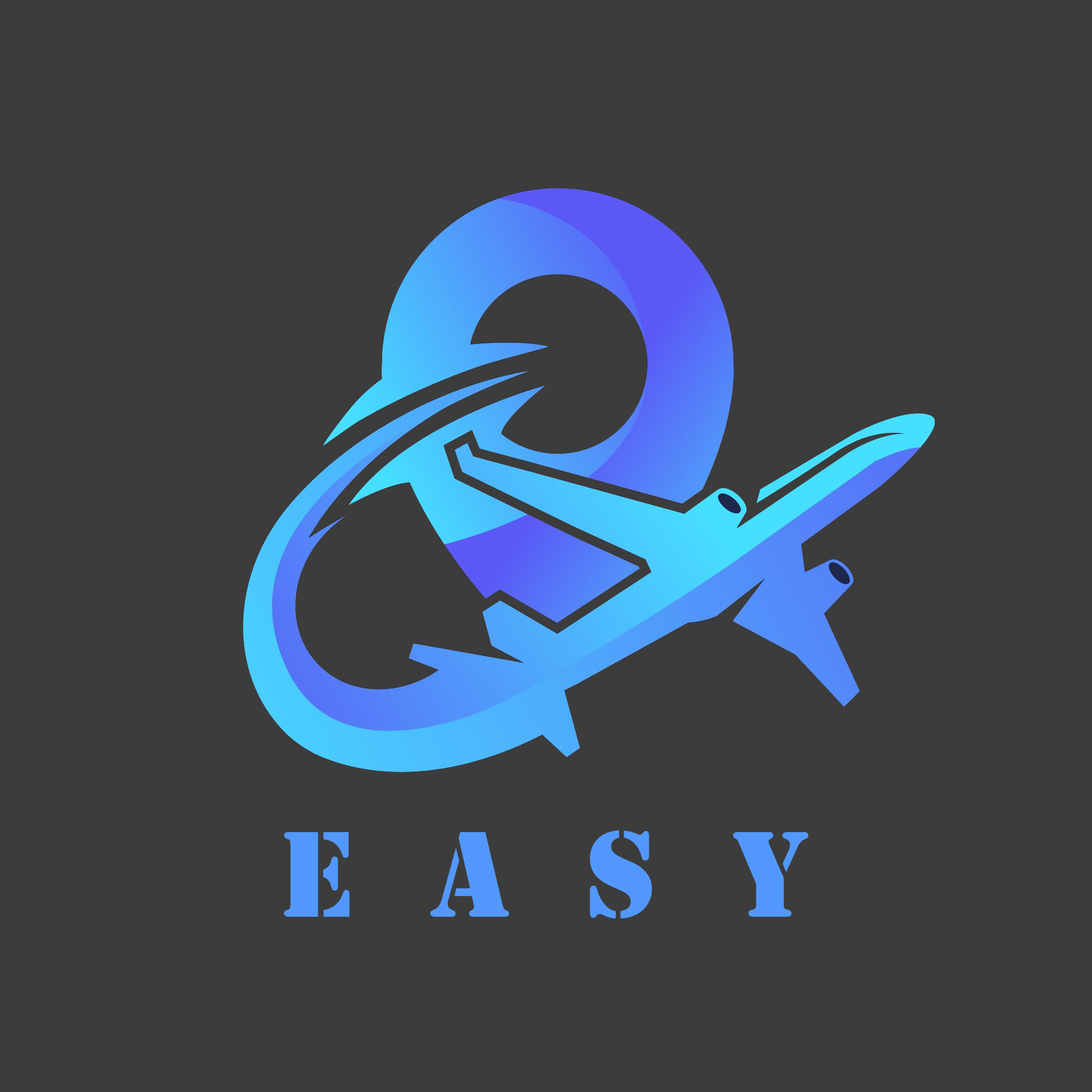
<style>
.page{position:relative;width:1092px;height:1092px;background:#3c3c3c}
.page>*{position:absolute;margin:0}
.t1{font:218.4px "Stencil";letter-spacing:0.6em;color:#5298fc}
</style>
<div class="page">
<p class="t1" style="left:284px;top:830px;width:525px;height:89px">Easy</p>
</div>
